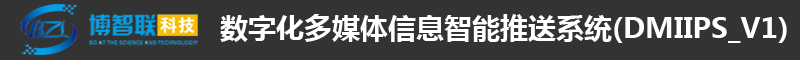
<style>
.page{position:relative;width:800px;height:60px;background:#333333}
.page>*{position:absolute;margin:0}
.t1{font:28px "MicrosoftYaHei-Bold";color:#ffffff}
</style>
<div class="page">
<p class="t1" style="left:220px;top:14px;width:567px;height:29px">数字化多媒体信息智能推送系统(DMIIPS_V1)</p>
</div>
